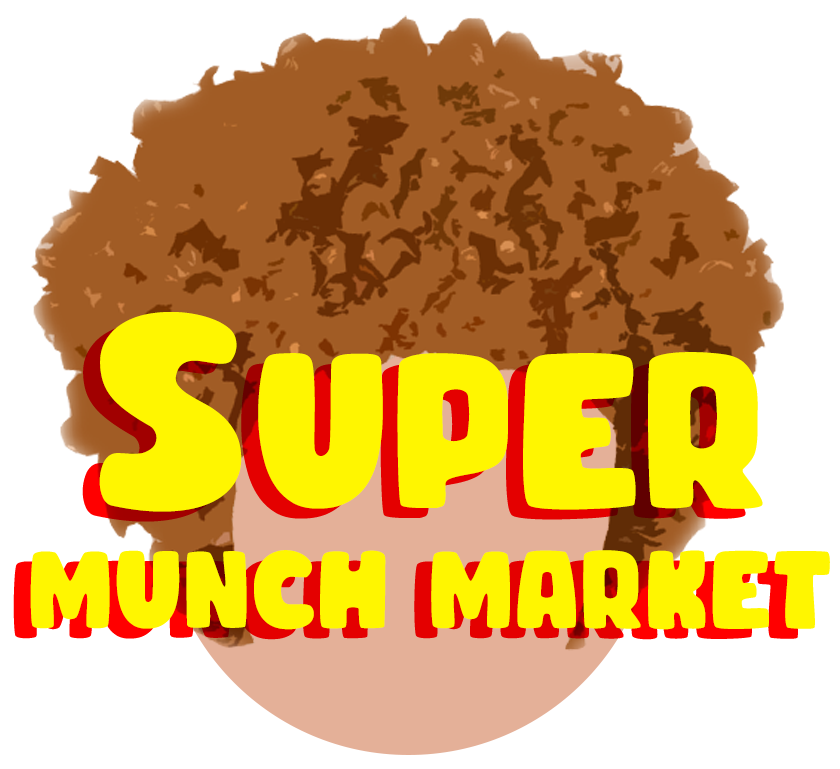
<style>
.page{position:relative;width:840px;height:769px;background:#ffffff}
.page>*{position:absolute;margin:0}
.t1{font:100px "CHIBOLDdemo";letter-spacing:0.005em;color:#fff600}
.t2{font:250px "CHIBOLDdemo";letter-spacing:0.005em;color:#fff600}
.t3{font:200px "CHIBOLDdemo";letter-spacing:0.005em;color:#fff600}
</style>
<div class="page">
<p class="t1" style="left:30px;top:312px;width:800px;height:318px;text-align:center"><span class="t2">S</span><span class="t3">uper<br></span>munch market</p>
</div>
